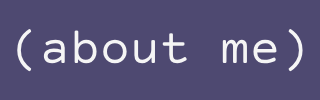
<style>
.page{position:relative;width:320px;height:100px;background:#4e4971}
.page>*{position:absolute;margin:0}
.t1{font:50px "CourierPrimeCode-Regular";color:#f5f5f5}
</style>
<div class="page">
<p class="t1" style="left:17px;top:29px;width:286px;height:43px">(about me)</p>
</div>
